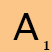
<style>
.page{position:relative;width:52px;height:52px;background:#fdc689}
.page>*{position:absolute;margin:0}
.t1{font:38px "LucidaSansUnicode";color:#000000}
.t2{font:13px "LiberationSerif-Bold";color:#000000}
</style>
<div class="page">
<p class="t1" style="left:13px;top:13px;width:26px;height:27px">A</p>
<p class="t2" style="left:44px;top:41px;width:6px;height:9px">1</p>
</div>
